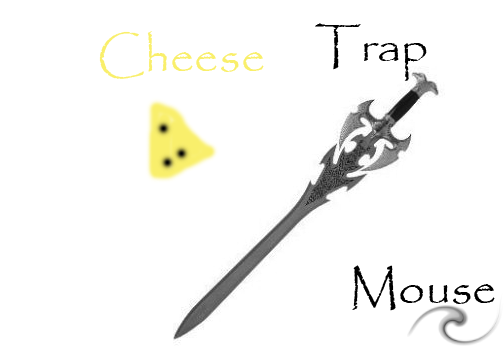
<style>
.page{position:relative;width:504px;height:360px;background:#ffffff}
.page>*{position:absolute;margin:0}
.t1{font:48px "Papyrus-Regular";color:#000000}
.t2{font:48px "Papyrus-Regular";color:#f9ef6b}
</style>
<div class="page">
<p class="t1" style="left:315px;top:23px;width:112px;height:58px">Trap</p>
<p class="t2" style="left:99px;top:31px;width:165px;height:48px">Cheese</p>
<p class="t1" style="left:352px;top:265px;width:143px;height:46px">Mouse</p>
</div>
